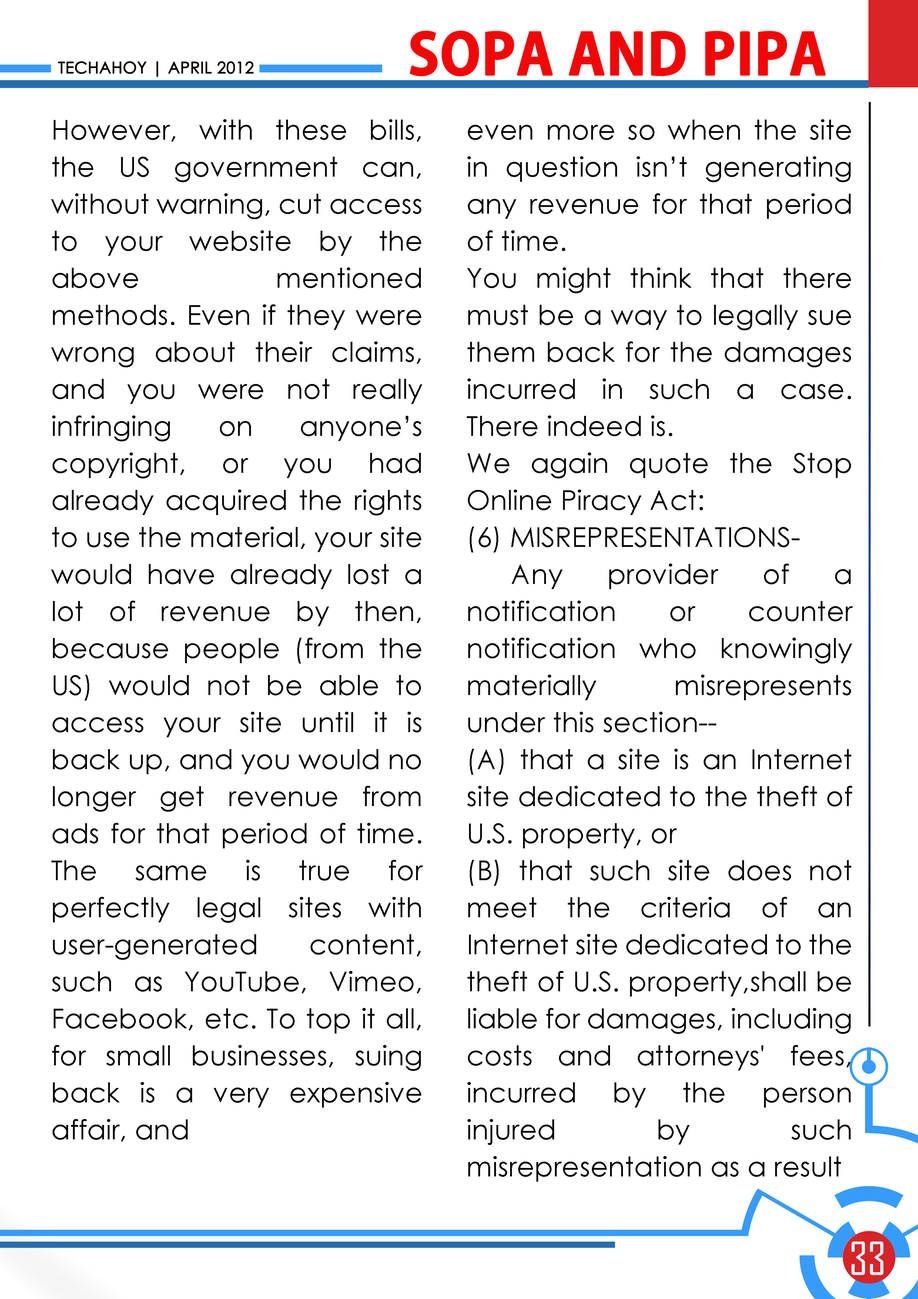
<style>
.page{position:relative;width:918px;height:1299px;background:#ffffff}
.page>*{position:absolute;margin:0}
.t1{font:55.5px "AdobeGothicStd-Bold";color:#f30606;text-transform:uppercase;font-weight:bold}
.t2{font:16px "CenturyGothic";color:#000000;text-transform:uppercase;font-weight:bold}
.t3{font:27.5px/37px "CenturyGothic";color:#080808}
.t4{font:43.7px "AgencyFB-Reg";color:#ffffff;text-transform:uppercase}
</style>
<div class="page">
<p class="t1" style="left:410px;top:30px;width:416px;height:46px">sopa and pipa</p>
<p class="t2" style="left:58px;top:61px;width:196px;height:16px">techahoy | APRIL 2012</p>
<p class="t3" style="left:51px;top:119px;width:372px;height:1022px;text-align:justify">However, with these bills, the US government can, without warning, cut access to your website by the above mentioned methods. Even if they were wrong about their claims, and you were not really infringing on anyone’s copyright, or you had already acquired the rights to use the material, your site would have already lost a lot of revenue by then, because people (from the US) would not be able to access your site until it is back up, and you would no longer get revenue from ads for that period of time. The same is true for perfectly legal sites with user-generated content, such as YouTube, Vimeo, Facebook, etc. To top it all, for small businesses, suing back is a very expensive affair, and</p>
<p class="t3" style="left:467px;top:119px;width:386px;height:1062px;text-align:justify">even more so when the site in question isn’t generating any revenue for that period of time. <br>You might think that there must be a way to legally sue them back for the damages incurred in such a case. There indeed is.<br>We again quote the Stop Online Piracy Act:<br>(6) MISREPRESENTATIONS-<br> Any provider of a notification or counter notification who knowingly materially misrepresents under this section--<br>(A) that a site is an Internet site dedicated to the theft of U.S. property, or<br>(B) that such site does not meet the criteria of an Internet site dedicated to the theft of U.S. property,shall be liable for damages, including costs and attorneys' fees, incurred by the person injured by such misrepresentation as a result</p>
<p class="t4" style="left:852px;top:1241px;width:32px;height:34px">33</p>
</div>
